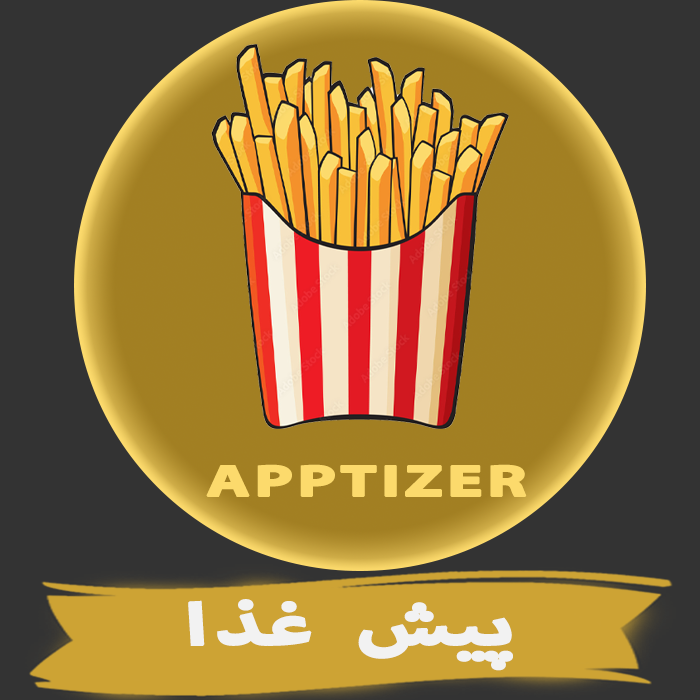
<style>
.page{position:relative;width:700px;height:700px;background:#333333}
.page>*{position:absolute;margin:0}
.t1{font:61.6px "MyriadArabic-Bold";letter-spacing:0.03em;color:#fcda6c;font-weight:bold;scale:1.5 1}
.t2{font:80.3px "MyriadArabic-Bold";letter-spacing:0.03em;color:#f2f2f2;font-weight:bold;scale:1.5 1}
</style>
<div class="page">
<p class="t1" style="left:206px;top:464px;width:321px;height:33px">APPTIZER</p>
<p class="t2" style="left:188px;top:599px;width:325px;height:72px">پیش غذا</p>
</div>
